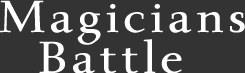
<style>
.page{position:relative;width:245px;height:73px;background:#333333}
.page>*{position:absolute;margin:0}
.t1{font:48px "Medio";letter-spacing:0.075em;color:#ffffff;scale:1.1 1}
</style>
<div class="page">
<p class="t1" style="left:0px;top:0px;width:245px;height:45px">Magicians</p>
<p class="t1" style="left:39px;top:39px;width:143px;height:34px">Battle</p>
</div>
